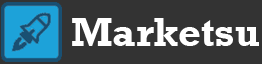
<style>
.page{position:relative;width:262px;height:64px;background:#333333}
.page>*{position:absolute;margin:0}
.t1{font:39.7px "Rockwell-Bold";color:#ffffff}
</style>
<div class="page">
<p class="t1" style="left:72px;top:18px;width:187px;height:28px">Marketsu</p>
</div>
